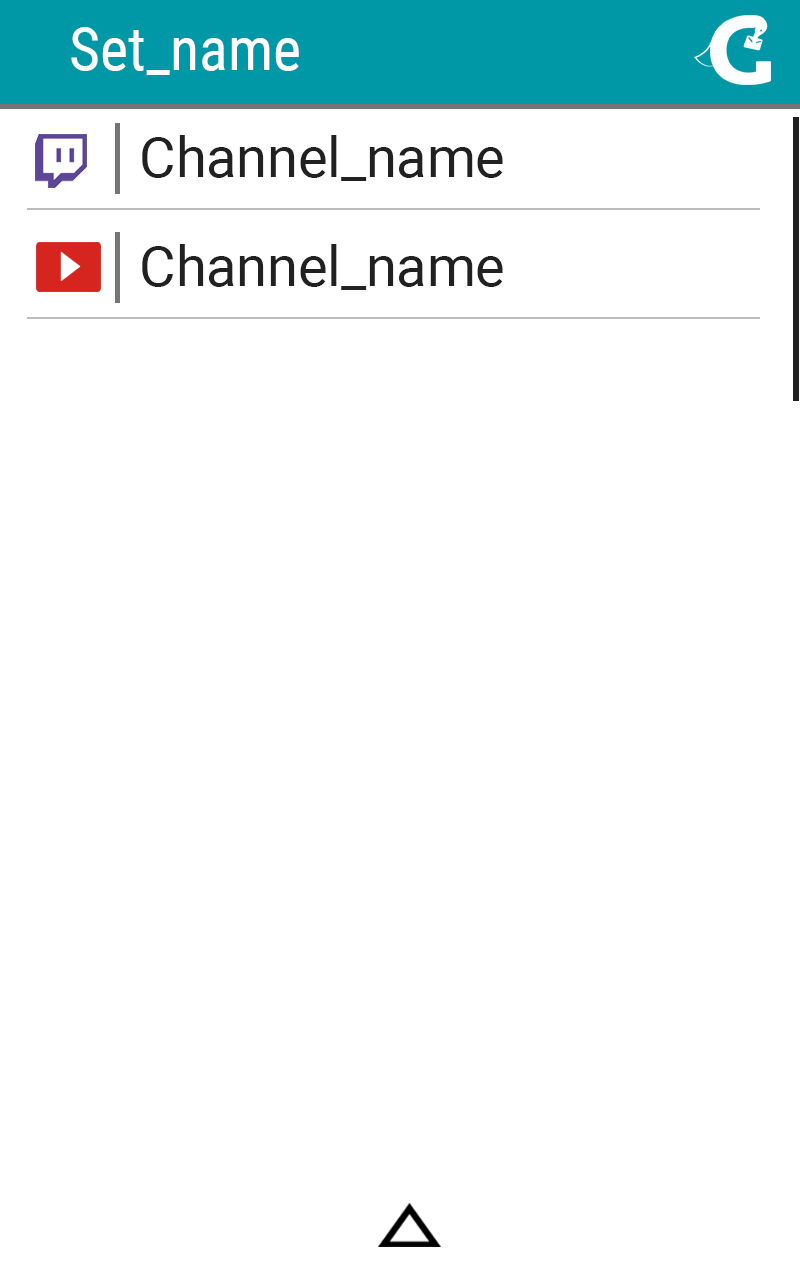
<style>
.page{position:relative;width:800px;height:1280px;background:#ffffff}
.page>*{position:absolute;margin:0}
.t1{font:60px "RobotoCondensed-Regular";color:#ffffff}
.t2{font:55.5px "Roboto-Regular";color:#212121}
</style>
<div class="page">
<p class="t1" style="left:71px;top:27px;width:228px;height:48px">Set_name</p>
<p class="t2" style="left:142px;top:135px;width:361px;height:46px">Channel_name</p>
<p class="t2" style="left:142px;top:244px;width:361px;height:46px">Channel_name</p>
</div>
